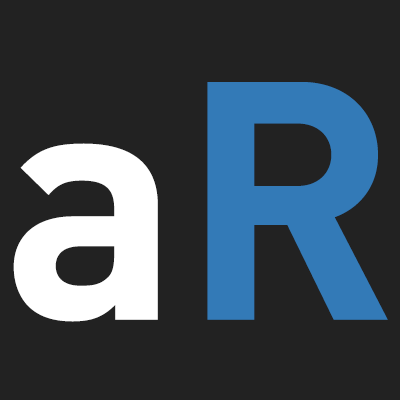
<style>
.page{position:relative;width:400px;height:400px;background:#222222}
.page>*{position:absolute;margin:0}
.t1{font:333.6px "DIN-Bold";color:#ffffff}
.t2{font:333.6px "DIN-Bold";color:#337ab7}
</style>
<div class="page">
<p class="t1" style="left:13px;top:82px;width:375px;height:240px">a<span class="t2">R</span></p>
</div>
